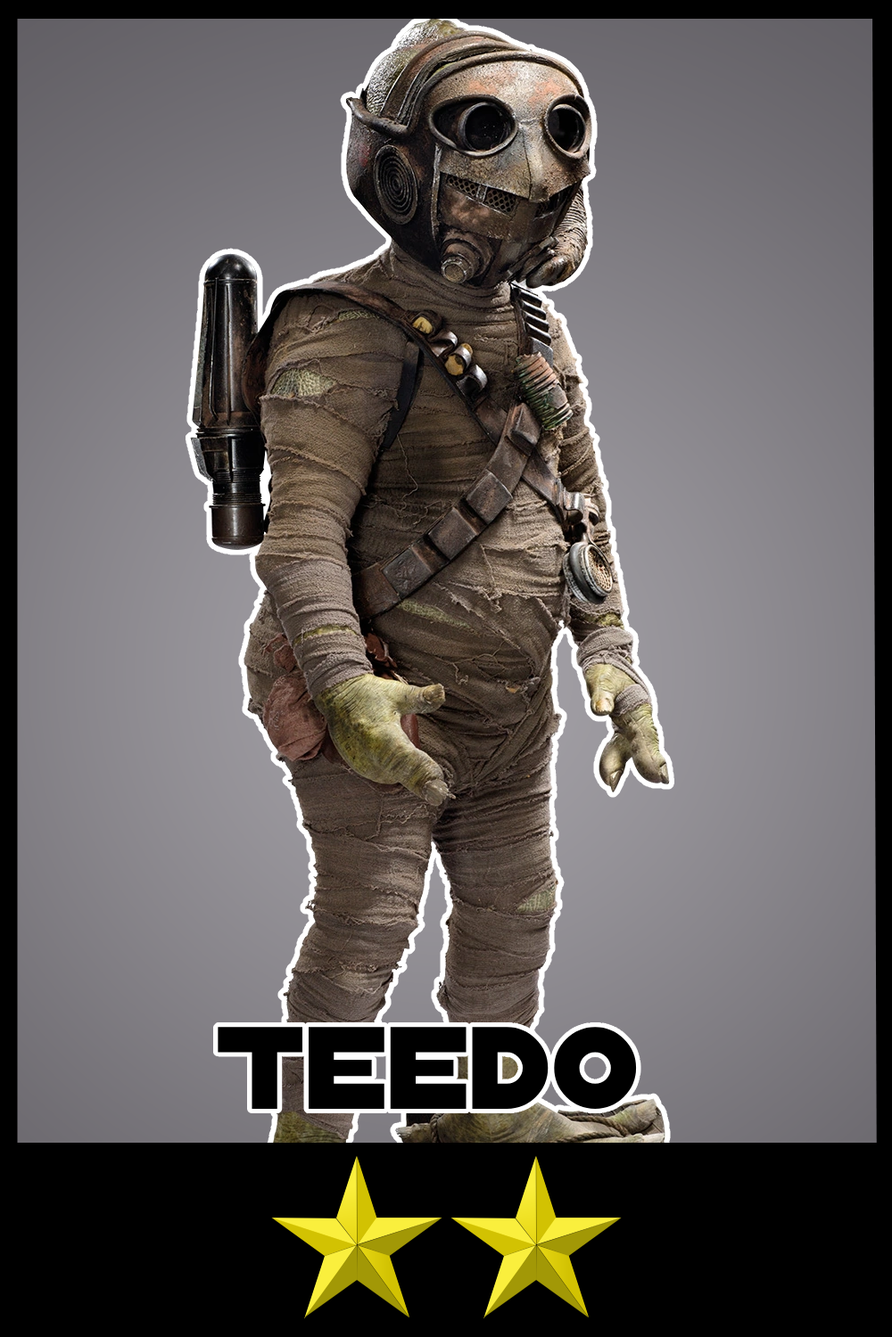
<style>
.page{position:relative;width:892px;height:1337px}
.page>*{position:absolute;margin:0}
.t1{font:125.9px "DistantGalaxy";color:#000000}
</style>
<div class="page">
<p class="t1" style="left:218px;top:1027px;width:419px;height:82px">Teedo</p>
</div>
